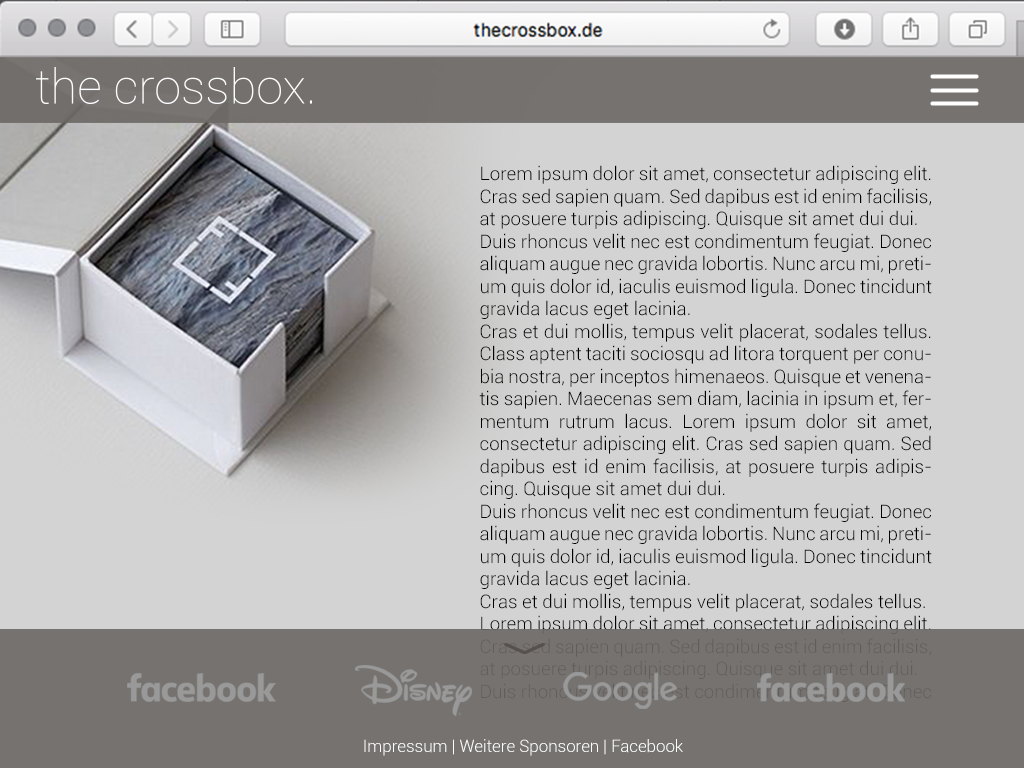
<style>
.page{position:relative;width:1024px;height:768px;background:#d3d3d3}
.page>*{position:absolute;margin:0}
.t1{font:18.8px/22.5px "Roboto-Light";color:#000000}
.t2{font:16.9px "Roboto-Light";color:#ffffff}
</style>
<div class="page">
<p class="t1" style="left:479px;top:165px;width:453px;height:537px;text-align:justify">Lorem ipsum dolor sit amet, consectetur adipiscing elit. Cras sed sapien quam. Sed dapibus est id enim facilisis, at posuere turpis adipiscing. Quisque sit amet dui dui.<br>Duis rhoncus velit nec est condimentum feugiat. Donec aliquam augue nec gravida lobortis. Nunc arcu mi, pretium quis dolor id, iaculis euismod ligula. Donec tincidunt gravida lacus eget lacinia.<br>Cras et dui mollis, tempus velit placerat, sodales tellus. Class aptent taciti sociosqu ad litora torquent per conubia nostra, per inceptos himenaeos. Quisque et venenatis sapien. Maecenas sem diam, lacinia in ipsum et, fermentum rutrum lacus. Lorem ipsum dolor sit amet, consectetur adipiscing elit. Cras sed sapien quam. Sed dapibus est id enim facilisis, at posuere turpis adipiscing. Quisque sit amet dui dui.<br>Duis rhoncus velit nec est condimentum feugiat. Donec aliquam augue nec gravida lobortis. Nunc arcu mi, pretium quis dolor id, iaculis euismod ligula. Donec tincidunt gravida lacus eget lacinia.<br>Cras et dui mollis, tempus velit placerat, sodales tellus.<br>Lorem ipsum dolor sit amet, consectetur adipiscing elit. Cras sed sapien quam. Sed dapibus est id enim facilisis, at posuere turpis adipiscing. Quisque sit amet dui dui.<br>Duis rhoncus velit nec est condimentum feugiat. Donec aliquam augue nec gravida lobortis. Nunc arcu mi, pretium quis dolor id, iaculis euismod ligula. Donec tincidunt gravida lacus eget lacinia.<br>Cras et dui mollis, tempus velit placerat, sodales tellus. Class aptent taciti sociosqu ad litora torquent per conubia nostra, per inceptos himenaeos. Quisque et venenatis sapien. Maecenas sem diam, lacinia in ipsum et, fermentum rutrum lacus. Class aptent taciti sociosqu ad litora torquent per conubia nostra, per inceptos himenaeos. Quisque et venenatis sapien. Maecenas sem diam, lacinia in ipsum et, fermentum rutrum lacus.</p>
<p class="t2" style="left:364px;top:739px;width:319px;height:17px">Impressum | Weitere Sponsoren | Facebook</p>
</div>
